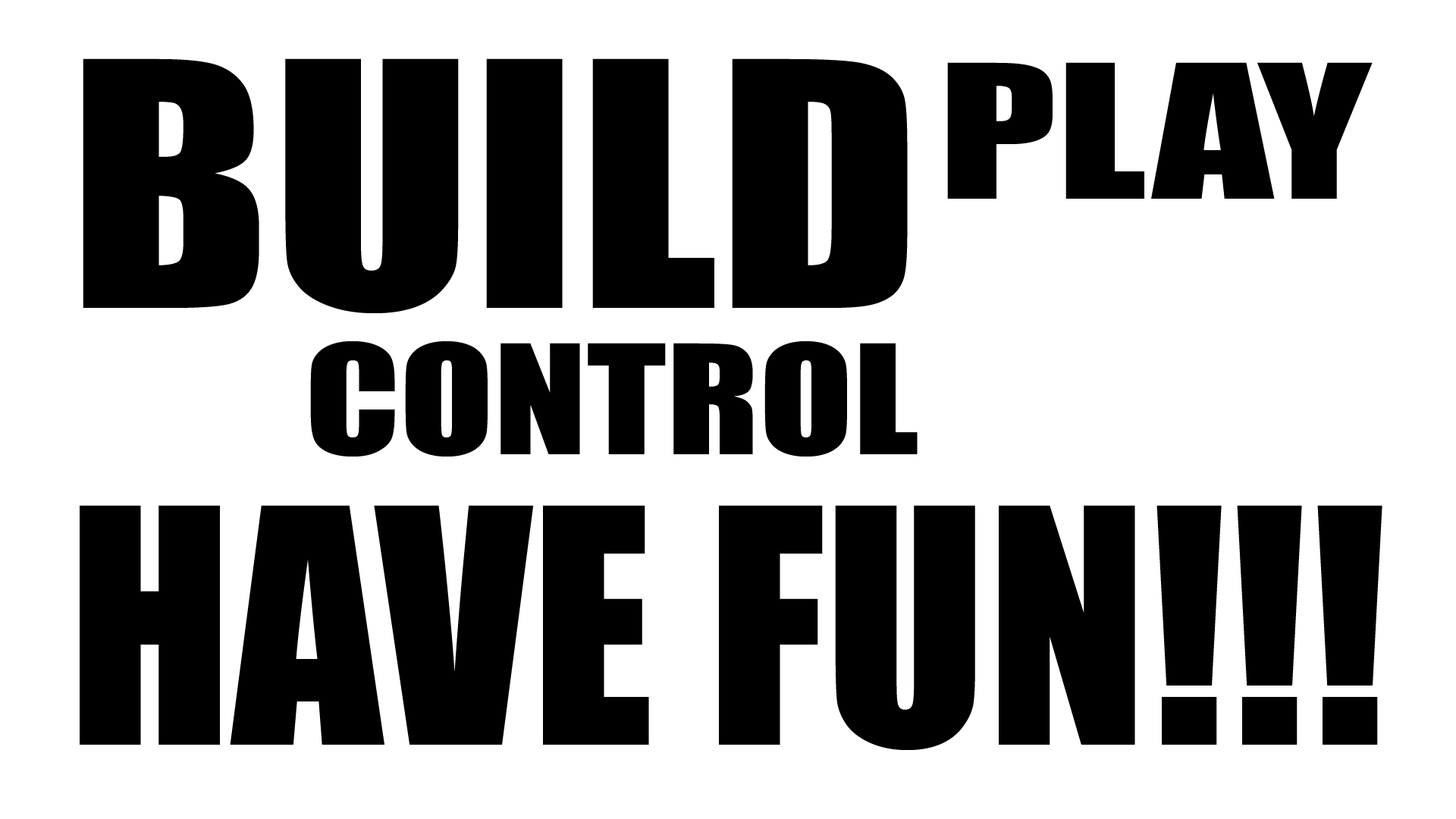
<style>
.page{position:relative;width:1456px;height:819px;background:#ffffff}
.page>*{position:absolute;margin:0}
.t1{font:314.4px "Impact";color:#000000;scale:1.17 1}
.t2{font:172.1px "Impact";color:#000000;scale:1.37 1}
.t3{font:140px "Impact";color:#000000;scale:1.23 1}
.t4{font:302.1px "Impact";color:#000000}
</style>
<div class="page">
<p class="t1" style="left:83px;top:58px;width:825px;height:255px">BUILD</p>
<p class="t2" style="left:947px;top:62px;width:426px;height:137px">PLAY</p>
<p class="t3" style="left:310px;top:340px;width:608px;height:117px">CONTROL</p>
<p class="t4" style="left:80px;top:505px;width:1302px;height:245px">HAVE FUN!!!</p>
</div>
